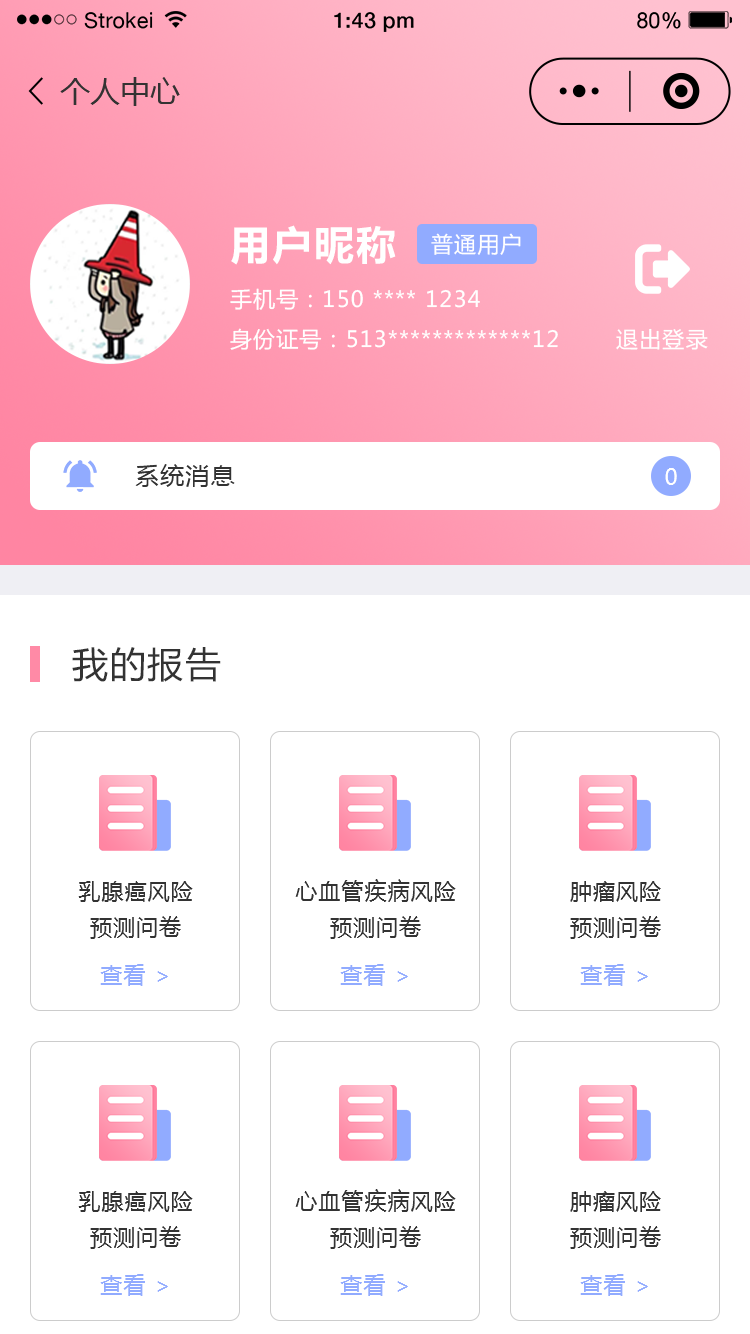
<style>
.page{position:relative;width:750px;height:1334px;background:#ffffff}
.page>*{position:absolute;margin:0}
.t1{font:30px "MicrosoftYaHei";color:#333333}
.t2{font:22px/40px "MicrosoftYaHei";letter-spacing:0.05em;color:#ffffff}
.t3{font:40px/48px "MicrosoftYaHei-Bold";letter-spacing:0.05em;color:#ffffff}
.t4{font:22px/48px "MicrosoftYaHei";letter-spacing:0.05em;color:#ffffff}
.t5{font:22px/41px "MicrosoftYaHei";letter-spacing:0.05em;color:#ffffff}
.t6{font:22px "MicrosoftYaHei";letter-spacing:0.05em;color:#ffffff}
.t7{font:24px "MicrosoftYaHei";letter-spacing:0.05em;color:#333333}
.t8{font:36px "MicrosoftYaHei";letter-spacing:0.05em;color:#333333}
.t9{font:22px/36px "MicrosoftYaHei";letter-spacing:0.05em;color:#333333}
.t10{font:22px "MicrosoftYaHei";letter-spacing:0.05em;color:#91abff}
</style>
<div class="page">
<p class="t1" style="left:60px;top:77px;width:120px;height:29px">个人中心</p>
<p class="t2" style="left:230px;top:225px;width:328px;height:125px"><span class="t3">用户昵称<br></span><span class="t4">手机号：1</span><span class="t5">5</span>0 **** 1234<br>身份证号：513*************12</p>
<p class="t6" style="left:431px;top:233px;width:90px;height:22px">普通用户</p>
<p class="t6" style="left:616px;top:328px;width:92px;height:22px">退出登录</p>
<p class="t7" style="left:135px;top:464px;width:100px;height:23px">系统消息</p>
<p class="t6" style="left:665px;top:468px;width:12px;height:17px">0</p>
<p class="t8" style="left:72px;top:647px;width:149px;height:35px">我的报告</p>
<p class="t9" style="left:78px;top:881px;width:115px;height:58px;text-align:center">乳腺癌风险<br>预测问卷</p>
<p class="t9" style="left:295px;top:879px;width:161px;height:60px;text-align:center">心血管疾病风险<br>预测问卷</p>
<p class="t9" style="left:570px;top:881px;width:91px;height:58px;text-align:center">肿瘤风险<br>预测问卷</p>
<p class="t10" style="left:100px;top:964px;width:68px;height:22px">查看 &gt;</p>
<p class="t10" style="left:340px;top:964px;width:68px;height:22px">查看 &gt;</p>
<p class="t10" style="left:580px;top:964px;width:68px;height:22px">查看 &gt;</p>
<p class="t9" style="left:78px;top:1191px;width:115px;height:58px;text-align:center">乳腺癌风险<br>预测问卷</p>
<p class="t9" style="left:295px;top:1189px;width:161px;height:60px;text-align:center">心血管疾病风险<br>预测问卷</p>
<p class="t9" style="left:570px;top:1191px;width:91px;height:58px;text-align:center">肿瘤风险<br>预测问卷</p>
<p class="t10" style="left:100px;top:1274px;width:68px;height:22px">查看 &gt;</p>
<p class="t10" style="left:340px;top:1274px;width:68px;height:22px">查看 &gt;</p>
<p class="t10" style="left:580px;top:1274px;width:68px;height:22px">查看 &gt;</p>
</div>
